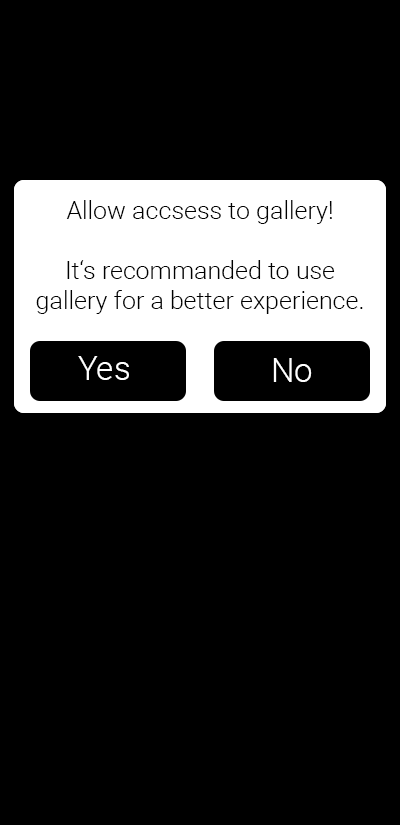
<style>
.page{position:relative;width:400px;height:825px;background:#000000}
.page>*{position:absolute;margin:0}
.t1{font:25px "Roboto-Light";color:#000000}
.t2{font:33.3px "Roboto-Light";color:#ffffff}
</style>
<div class="page">
<p class="t1" style="left:30px;top:200px;width:341px;height:114px;text-align:center">Allow accsess to camera!<br><br>Please note this Application will only work with Camera usage!</p>
<p class="t1" style="left:36px;top:200px;width:327px;height:114px;text-align:center">Allow accsess to gallery!<br><br>It‘s recommanded to use <br>gallery for a better experience.</p>
<p class="t2" style="left:78px;top:356px;width:51px;height:24px">Yes</p>
<p class="t2" style="left:78px;top:356px;width:51px;height:24px">Yes</p>
<p class="t2" style="left:273px;top:358px;width:39px;height:24px">No</p>
<p class="t2" style="left:273px;top:358px;width:39px;height:24px">No</p>
</div>
